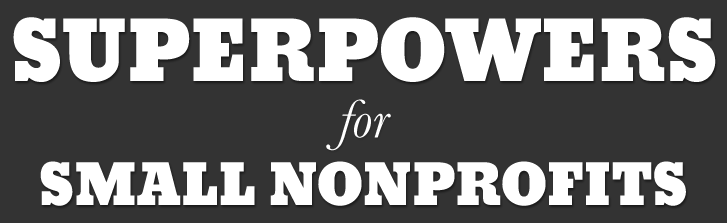
<style>
.page{position:relative;width:727px;height:223px;background:#333333}
.page>*{position:absolute;margin:0}
.t1{font:79px "Bevan";color:#ffffff}
.t2{font:56px "Baskerville-Italic";color:#ffffff}
.t3{font:54px "Bevan";color:#ffffff}
</style>
<div class="page">
<p class="t1" style="left:13px;top:17px;width:703px;height:65px">SUPERPOWERS</p>
<p class="t2" style="left:326px;top:99px;width:65px;height:52px">for</p>
<p class="t3" style="left:40px;top:161px;width:646px;height:45px">SMALL NONPROFITS</p>
</div>
